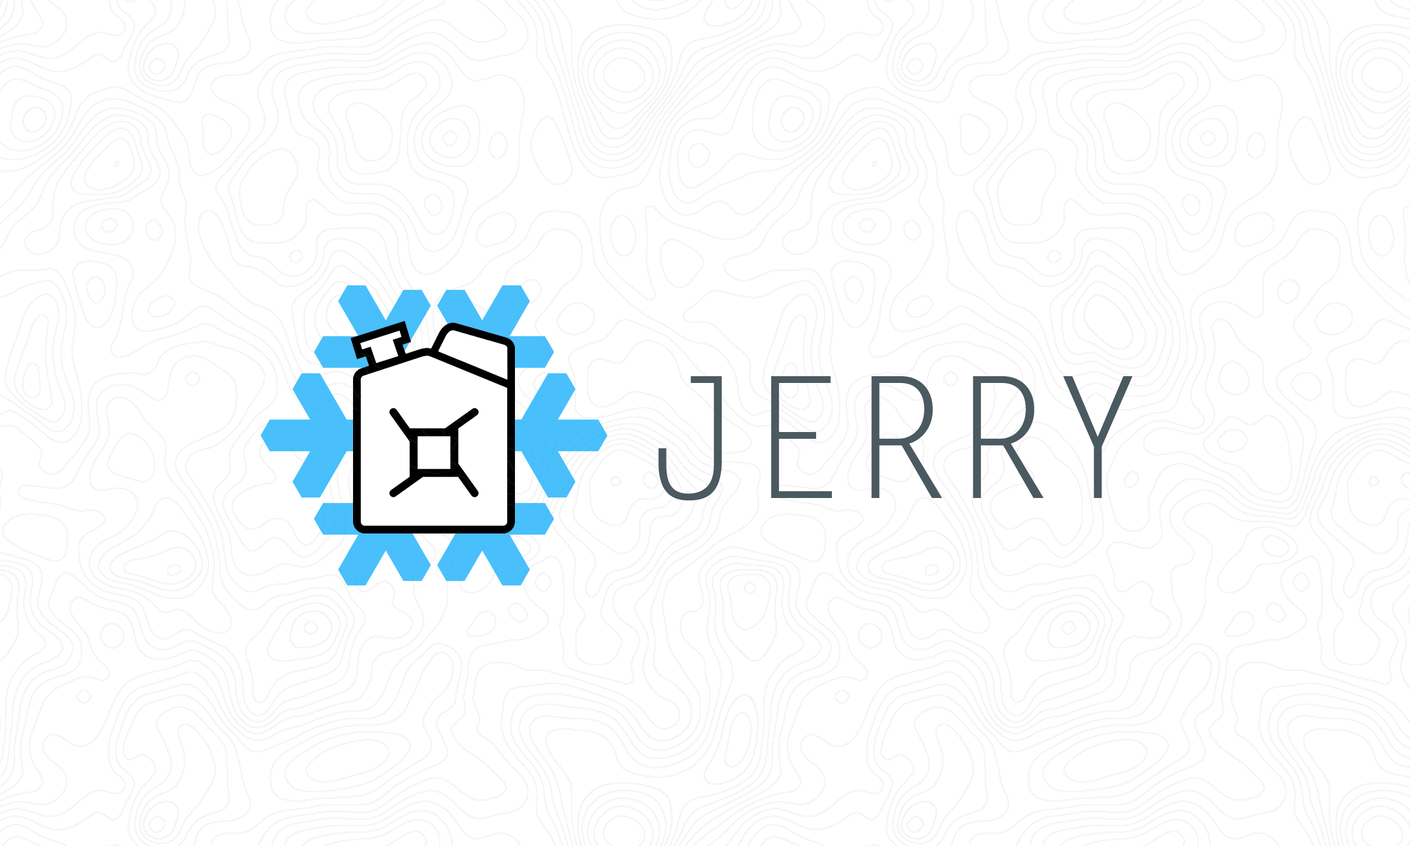
<style>
.page{position:relative;width:1410px;height:846px;background:#ffffff}
.page>*{position:absolute;margin:0}
.t1{font:169.2px "LetterGothicStd";color:#4b5960}
</style>
<div class="page">
<p class="t1" style="left:658px;top:376px;width:474px;height:125px">JERRY</p>
</div>
